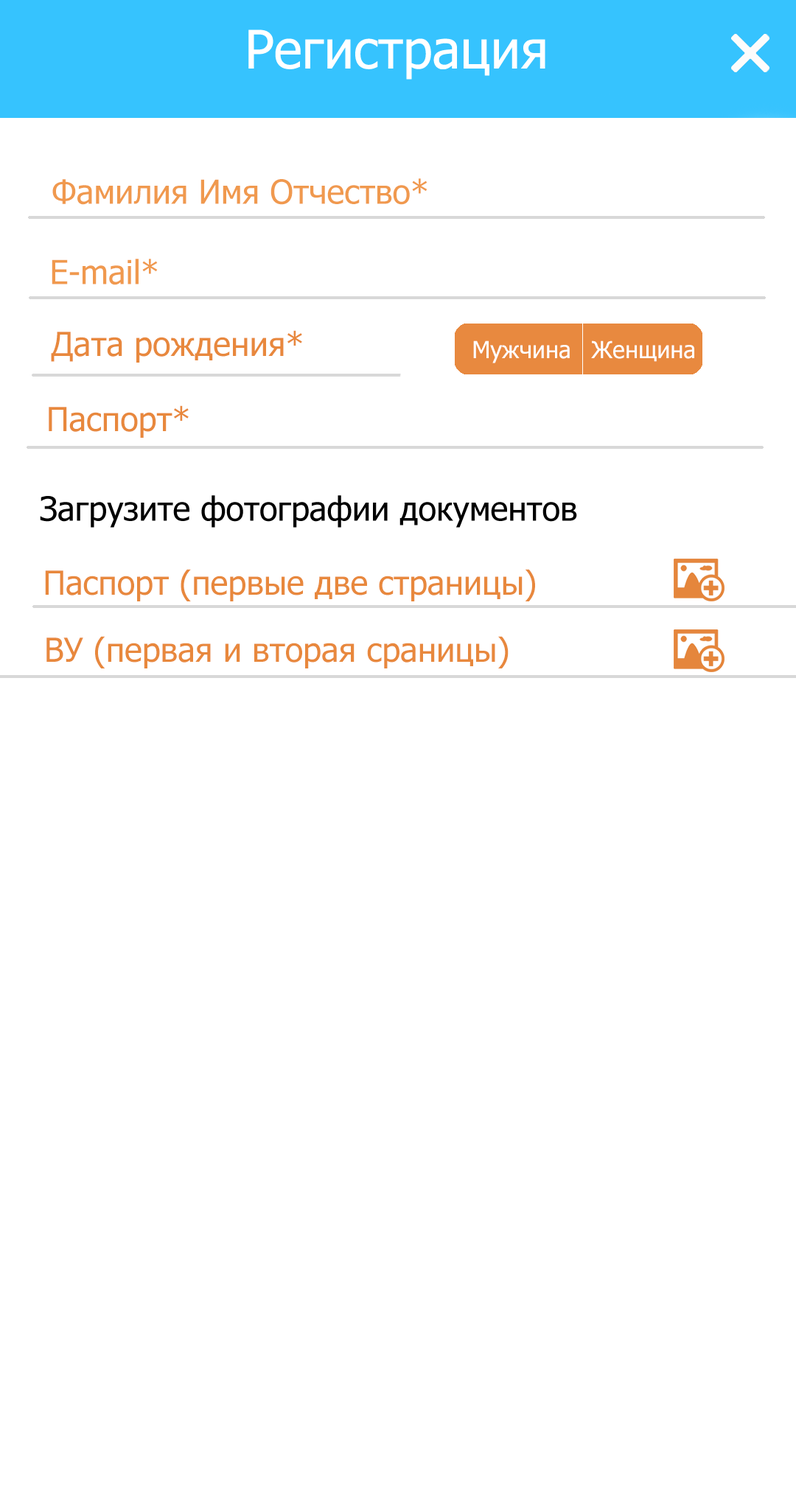
<style>
.page{position:relative;width:796px;height:1499px;background:#ffffff}
.page>*{position:absolute;margin:0}
.t1{font:33.2px "Tahoma";color:#f0994e}
.t2{font:33.2px "Tahoma";color:#e8883d}
.t3{font:23.6px "Tahoma";color:#ffffff}
</style>
<div class="page">
<p class="t1" style="left:52px;top:178px;width:375px;height:27px">Фамилия Имя Отчество*</p>
<p class="t1" style="left:52px;top:259px;width:106px;height:26px">E-mail*</p>
<p class="t2" style="left:51px;top:330px;width:251px;height:32px">Дата рождения*</p>
<p class="t3" style="left:473px;top:340px;width:97px;height:23px">Мужчина</p>
<p class="t3" style="left:591px;top:340px;width:103px;height:22px">Женщина</p>
<p class="t2" style="left:49px;top:405px;width:140px;height:33px">Паспорт*</p>
<p class="t2" style="left:45px;top:569px;width:490px;height:32px">Паспорт (первые две страницы)</p>
<p class="t2" style="left:46px;top:636px;width:462px;height:32px">ВУ (первая и вторая сраницы)</p>
</div>
